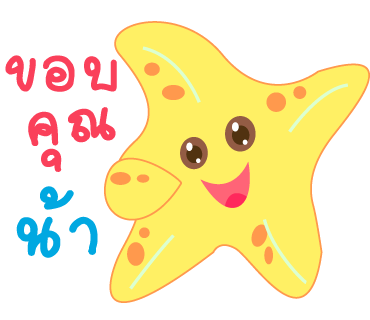
<style>
.page{position:relative;width:370px;height:320px;background:#ffffff}
.page>*{position:absolute;margin:0}
.t1{font:94px "2005_iannnnnMTV";letter-spacing:0.025em;color:#fa405a;scale:1.06 1}
.t2{font:96px "2005_iannnnnMTV";letter-spacing:0.025em;color:#fa405a;scale:1.06 1}
.t3{font:111px "2005_iannnnnMTV";letter-spacing:0.025em;color:#00a8e1;scale:1.06 1}
</style>
<div class="page">
<p class="t1" style="left:5px;top:55px;width:112px;height:37px">ขอบ</p>
<p class="t2" style="left:28px;top:107px;width:88px;height:65px;rotate:-5deg">คุณ</p>
<p class="t3" style="left:16px;top:186px;width:82px;height:72px">น้า</p>
</div>
